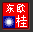
<style>
.page{position:relative;width:33px;height:32px;background:#f20000}
.page>*{position:absolute;margin:0}
.t1{font:10.4px "SimSun";color:#ffffff}
.t2{font:11.7px "SimSun";color:#ffffff}
</style>
<div class="page">
<p class="t1" style="left:6px;top:4px;width:19px;height:9px">东欧</p>
<p class="t2" style="left:16px;top:15px;width:11px;height:12px">桂</p>
</div>
